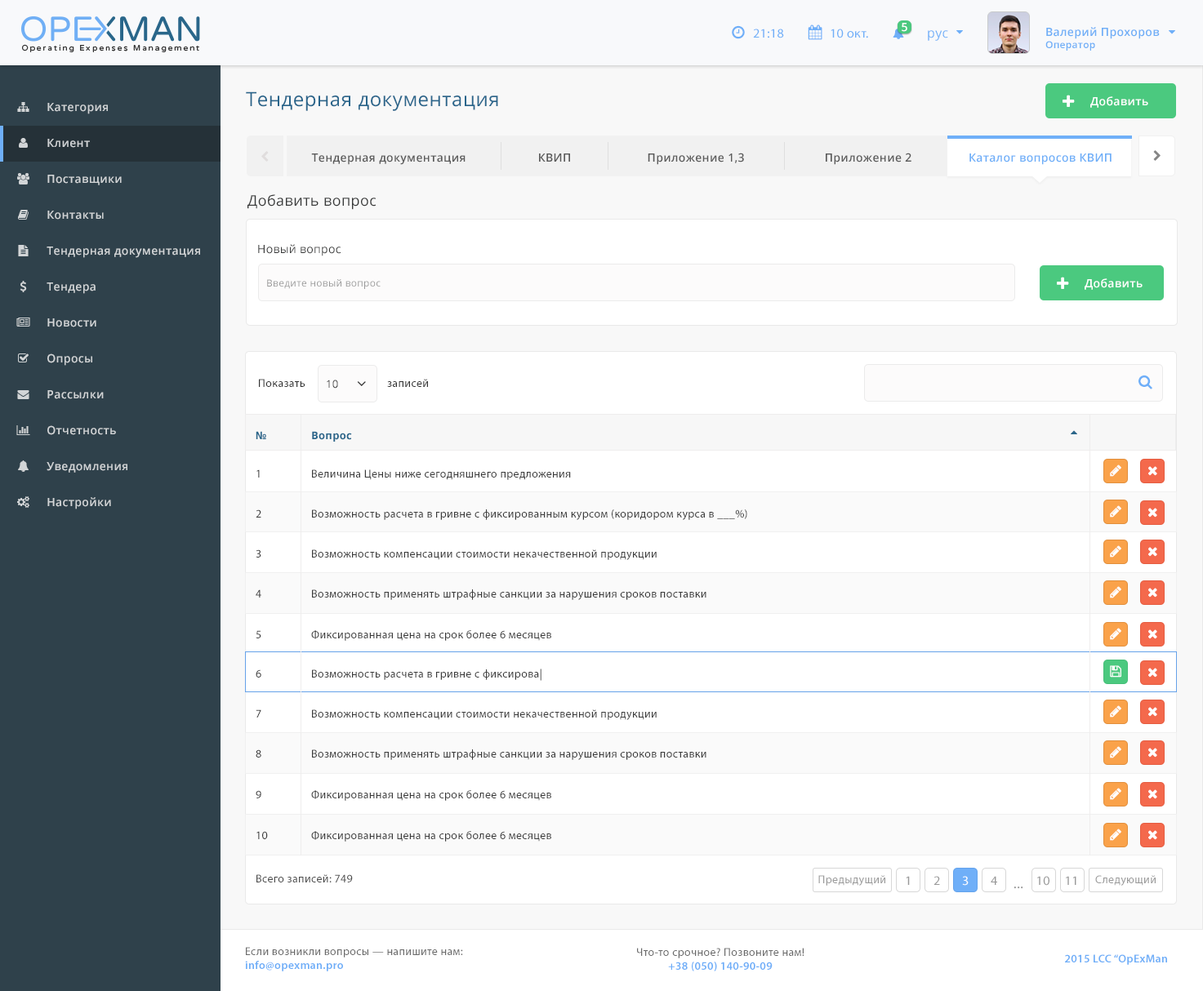
<style>
.page{position:relative;width:1203px;height:991px;background:#ffffff}
.page>*{position:absolute;margin:0}
.t1{font:13px "MyriadPro-Regular";letter-spacing:0.025em;color:#6faff8}
.t2{font:11.4px "OpenSans-Semibold";letter-spacing:0.025em;color:#ffffff}
.t3{font:11.4px "OpenSans-Semibold";letter-spacing:0.025em;color:#6eaef7}
.t4{font:9.8px "OpenSans-Semibold";letter-spacing:0.025em;color:#6eaef7}
.t5{font:13px "OpenSans";letter-spacing:0.025em;color:#6eaff8}
.t6{font:19.5px "OpenSans";letter-spacing:0.025em;color:#29658b}
.t7{font:11.4px "OpenSans-Semibold";letter-spacing:0.025em;color:#d2d5d7}
.t8{font:11.4px "OpenSans-Semibold";letter-spacing:0.025em;color:#5a5a5a}
.t9{font:11.4px "OpenSans-Semibold";letter-spacing:0.025em;color:#6eaff8}
.t10{font:14.6px "OpenSans";letter-spacing:0.025em;color:#373838}
.t11{font:11.4px "OpenSans";letter-spacing:0.025em;color:#373838}
.t12{font:9.8px "OpenSans";letter-spacing:0.025em;color:#999999}
.t13{font:11.4px "MyriadPro-Regular";letter-spacing:0.025em;color:#333333}
.t14{font:10.6px "OpenSans";letter-spacing:0.025em;color:#333333}
.t15{font:10.6px "OpenSans-Bold";letter-spacing:0.025em;color:#29668b}
.t16{font:11.4px "MyriadPro-Regular";letter-spacing:0.025em;color:#3a3a3a}
.t17{font:11.4px "MyriadPro-Regular";letter-spacing:0.025em;color:#4c4c4c}
.t18{font:11.4px "MyriadPro-Regular";letter-spacing:0.025em;color:#999999}
.t19{font:13px "MyriadPro-Regular";letter-spacing:0.025em;color:#999999}
.t20{font:13px "MyriadPro-Regular";letter-spacing:0.025em;color:#ffffff}
.t21{font:14.6px "MyriadPro-Regular";letter-spacing:0.025em;color:#999999}
.t22{font:11.4px "MyriadPro-Regular";letter-spacing:0.025em;color:#696969}
.t23{font:11.4px "MyriadPro-Semibold";letter-spacing:0.025em;color:#6eaef8}
</style>
<div class="page">
<p class="t1" style="left:753px;top:29px;width:31px;height:9px">21:18</p>
<p class="t1" style="left:830px;top:29px;width:38px;height:9px">10 окт.</p>
<p class="t2" style="left:902px;top:23px;width:5px;height:9px">5</p>
<p class="t3" style="left:1045px;top:27px;width:115px;height:24px">Валерий Прохоров<br><span class="t4">Оператор</span></p>
<p class="t5" style="left:928px;top:30px;width:20px;height:11px">рус</p>
<p class="t6" style="left:246px;top:91px;width:252px;height:20px">Тендерная документация</p>
<p class="t2" style="left:1090px;top:96px;width:58px;height:12px">Добавить</p>
<p class="t7" style="left:47px;top:103px;width:61px;height:11px">Категория</p>
<p class="t7" style="left:47px;top:139px;width:43px;height:9px">Клиент</p>
<p class="t8" style="left:311px;top:154px;width:154px;height:11px">Тендерная документация</p>
<p class="t8" style="left:539px;top:154px;width:31px;height:8px">КВИП</p>
<p class="t8" style="left:648px;top:153px;width:96px;height:12px">Приложение 1,3</p>
<p class="t8" style="left:826px;top:153px;width:85px;height:12px">Приложение 2</p>
<p class="t9" style="left:969px;top:154px;width:142px;height:11px">Каталог вопросов КВИП</p>
<p class="t7" style="left:47px;top:175px;width:75px;height:10px">Поставщики</p>
<p class="t10" style="left:247px;top:194px;width:129px;height:16px">Добавить вопрос</p>
<p class="t7" style="left:47px;top:211px;width:57px;height:9px">Контакты</p>
<p class="t11" style="left:258px;top:244px;width:83px;height:12px">Новый вопрос</p>
<p class="t7" style="left:47px;top:247px;width:153px;height:11px">Тендерная документация</p>
<p class="t12" style="left:267px;top:279px;width:114px;height:10px">Введите новый вопрос</p>
<p class="t2" style="left:1084px;top:278px;width:58px;height:12px">Добавить</p>
<p class="t7" style="left:47px;top:283px;width:49px;height:11px">Тендера</p>
<p class="t7" style="left:47px;top:318px;width:49px;height:9px">Новости</p>
<p class="t7" style="left:47px;top:354px;width:45px;height:12px">Опросы</p>
<p class="t13" style="left:259px;top:379px;width:46px;height:8px">Показать</p>
<p class="t14" style="left:327px;top:380px;width:11px;height:9px">10</p>
<p class="t13" style="left:387px;top:379px;width:41px;height:8px">записей</p>
<p class="t7" style="left:47px;top:390px;width:57px;height:9px">Рассылки</p>
<p class="t7" style="left:47px;top:425px;width:69px;height:10px">Отчетность</p>
<p class="t15" style="left:256px;top:431px;width:10px;height:8px">№</p>
<p class="t15" style="left:312px;top:431px;width:40px;height:11px">Вопрос</p>
<p class="t7" style="left:47px;top:462px;width:80px;height:11px">Уведомления</p>
<p class="t16" style="left:256px;top:470px;width:4px;height:8px">1</p>
<p class="t16" style="left:312px;top:470px;width:259px;height:10px">Величина Цены ниже сегодняшнего предложения</p>
<p class="t7" style="left:47px;top:497px;width:64px;height:13px">Настройки</p>
<p class="t16" style="left:256px;top:510px;width:5px;height:8px">2</p>
<p class="t16" style="left:312px;top:510px;width:435px;height:10px">Возможность расчета в гривне с фиксированным курсом (коридором курса в ___%)</p>
<p class="t16" style="left:256px;top:550px;width:5px;height:8px">3</p>
<p class="t16" style="left:312px;top:550px;width:345px;height:10px">Возможность компенсации стоимости некачественной продукции</p>
<p class="t16" style="left:256px;top:590px;width:5px;height:8px">4</p>
<p class="t16" style="left:312px;top:590px;width:394px;height:10px">Возможность применять штрафные санкции за нарушения сроков поставки</p>
<p class="t16" style="left:256px;top:630px;width:5px;height:9px">5</p>
<p class="t16" style="left:311px;top:630px;width:240px;height:11px">Фиксированная цена на срок более 6 месяцев</p>
<p class="t16" style="left:256px;top:670px;width:5px;height:8px">6</p>
<p class="t16" style="left:312px;top:669px;width:229px;height:12px">Возможность расчета в гривне с фиксирова|</p>
<p class="t16" style="left:256px;top:710px;width:5px;height:8px">7</p>
<p class="t16" style="left:312px;top:710px;width:345px;height:10px">Возможность компенсации стоимости некачественной продукции</p>
<p class="t16" style="left:256px;top:750px;width:5px;height:8px">8</p>
<p class="t16" style="left:312px;top:750px;width:394px;height:10px">Возможность применять штрафные санкции за нарушения сроков поставки</p>
<p class="t16" style="left:256px;top:790px;width:5px;height:9px">9</p>
<p class="t16" style="left:311px;top:790px;width:240px;height:11px">Фиксированная цена на срок более 6 месяцев</p>
<p class="t16" style="left:256px;top:831px;width:12px;height:8px">10</p>
<p class="t16" style="left:311px;top:831px;width:240px;height:11px">Фиксированная цена на срок более 6 месяцев</p>
<p class="t17" style="left:256px;top:875px;width:97px;height:8px">Всего записей: 749</p>
<p class="t18" style="left:818px;top:875px;width:67px;height:11px">Предыдущий</p>
<p class="t19" style="left:906px;top:876px;width:4px;height:9px">1</p>
<p class="t19" style="left:933px;top:876px;width:7px;height:9px">2</p>
<p class="t20" style="left:962px;top:876px;width:6px;height:10px">3</p>
<p class="t19" style="left:991px;top:876px;width:6px;height:9px">4</p>
<p class="t19" style="left:1037px;top:876px;width:12px;height:10px">10</p>
<p class="t19" style="left:1066px;top:876px;width:10px;height:9px">11</p>
<p class="t18" style="left:1095px;top:875px;width:60px;height:11px">Следующий</p>
<p class="t21" style="left:1013px;top:887px;width:10px;height:2px">...</p>
<p class="t22" style="left:245px;top:947px;width:218px;height:25px">Если возникли вопросы — напишите нам:<br><span class="t23">info@opexman.pro</span></p>
<p class="t22" style="left:637px;top:948px;width:167px;height:24px;text-align:center">Что-то срочное? Позвоните нам!<br><span class="t23">+38 (050) 140-90-09</span></p>
<p class="t23" style="left:1065px;top:955px;width:102px;height:10px">2015 LCC “OpExMan</p>
</div>
